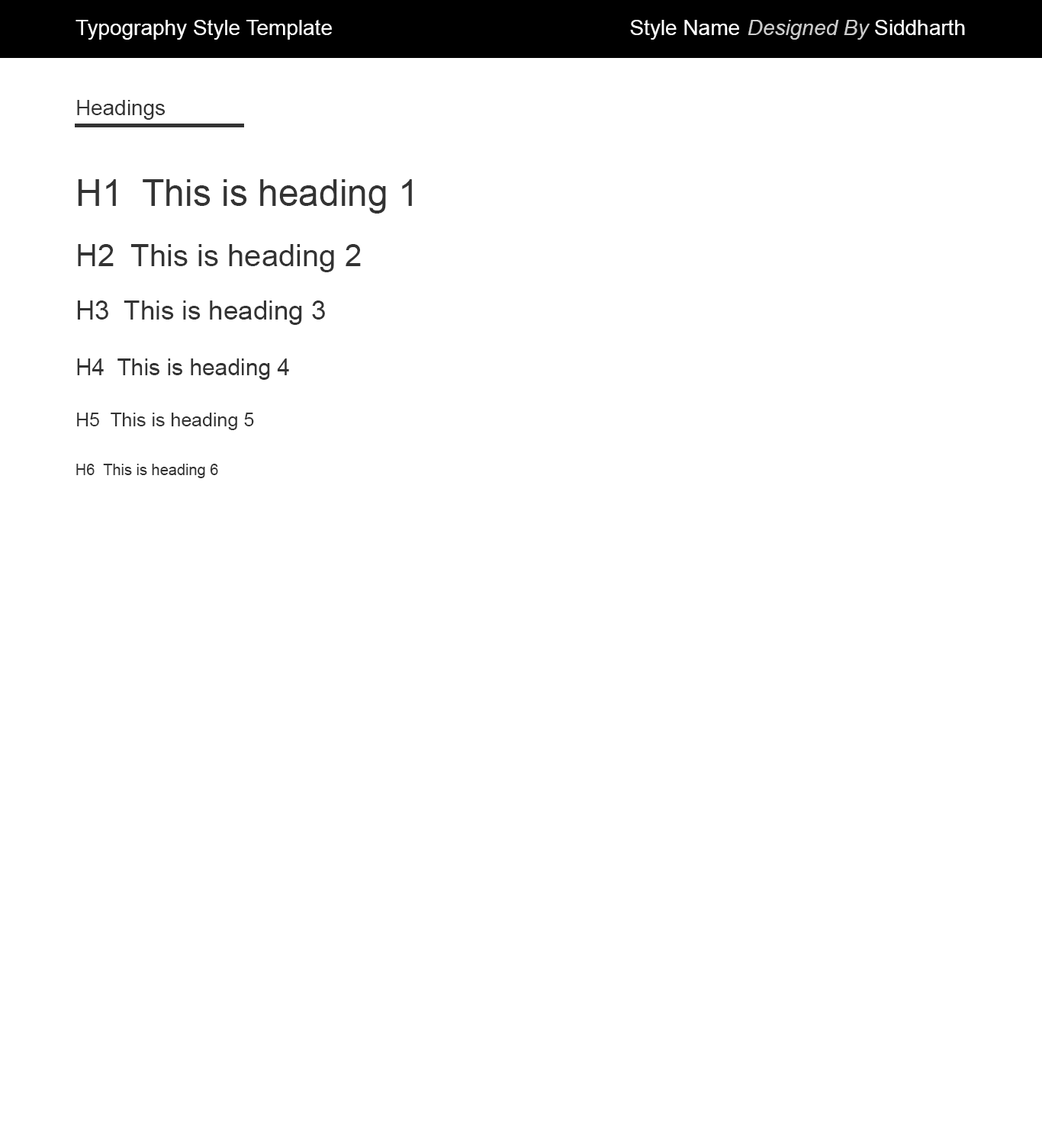
<style>
.page{position:relative;width:1042px;height:1144px;background:#ffffff}
.page>*{position:absolute;margin:0}
.t1{font:21.4px "ArialMT";color:#ffffff}
.t2{font:21.4px "Arial-ItalicMT";color:#cccccc}
.t3{font:21.4px "ArialMT";color:#333333}
.t4{font:36.6px "ArialMT";color:#333333}
.t5{font:30.5px "ArialMT";color:#333333}
.t6{font:26.7px "ArialMT";color:#333333}
.t7{font:22.9px "ArialMT";color:#333333}
.t8{font:19.1px "ArialMT";color:#333333}
.t9{font:15.3px "ArialMT";color:#333333}
</style>
<div class="page">
<p class="t1" style="left:76px;top:20px;width:256px;height:20px">Typography Style Template</p>
<p class="t2" style="left:630px;top:20px;width:335px;height:20px"><span class="t1">Style Name </span>Designed By <span class="t1">Siddharth</span></p>
<p class="t3" style="left:77px;top:100px;width:88px;height:20px">Headings</p>
<p class="t4" style="left:78px;top:179px;width:334px;height:35px">H1  This is heading 1</p>
<p class="t5" style="left:78px;top:244px;width:283px;height:28px">H2  This is heading 2</p>
<p class="t6" style="left:77px;top:301px;width:248px;height:24px">H3  This is heading 3</p>
<p class="t7" style="left:77px;top:359px;width:212px;height:21px">H4  This is heading 4</p>
<p class="t8" style="left:77px;top:413px;width:177px;height:17px">H5  This is heading 5</p>
<p class="t9" style="left:76px;top:464px;width:142px;height:14px">H6  This is heading 6</p>
</div>
